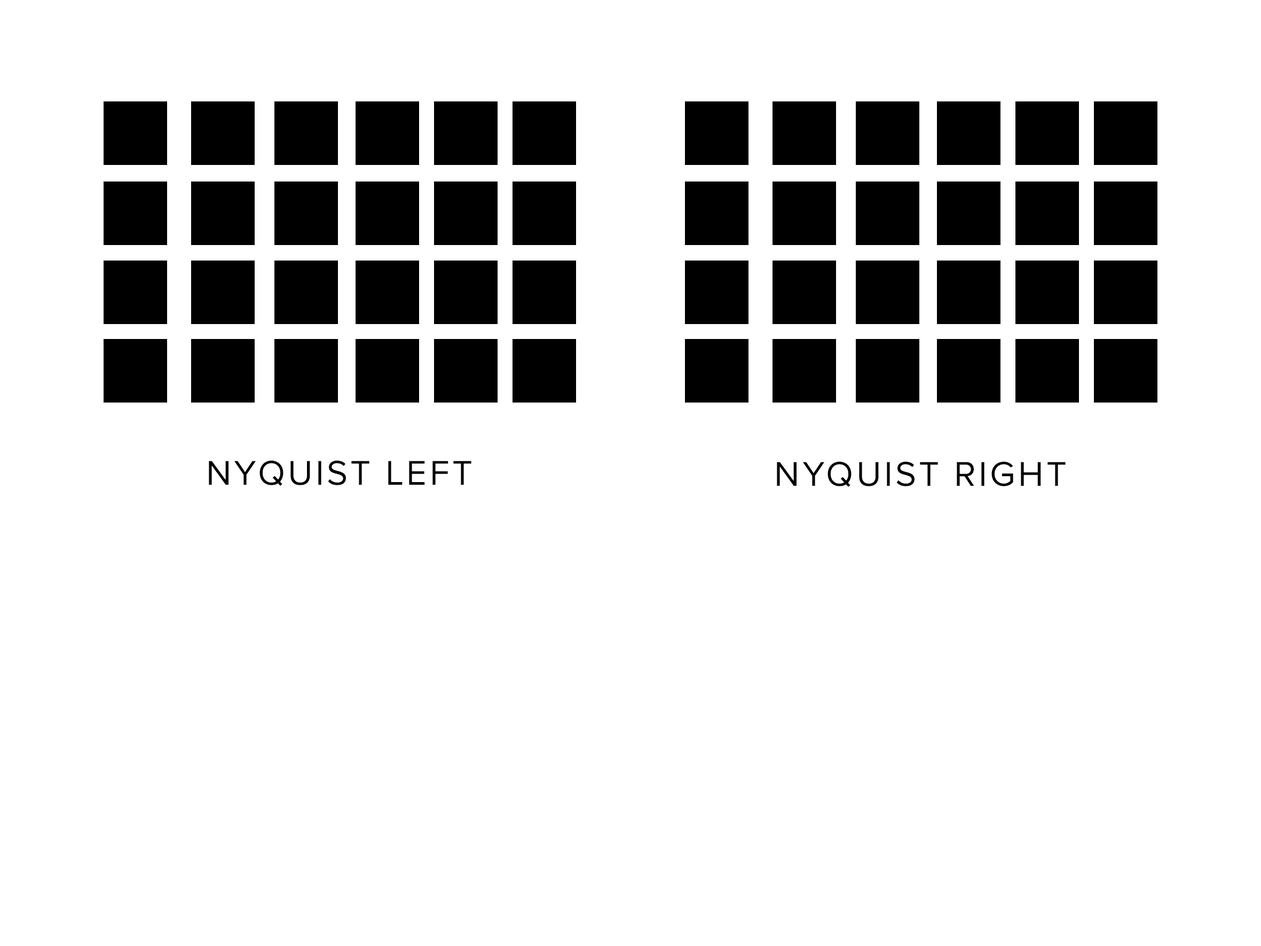
<style>
.page{position:relative;width:1261px;height:946px;background:#ffffff}
.page>*{position:absolute;margin:0}
.t1{font:35.6px "ProximaNova-Regular";letter-spacing:0.08em;color:#000000;text-transform:uppercase}
</style>
<div class="page">
<p class="t1" style="left:209px;top:460px;width:262px;height:26px">nyquist LEFT</p>
<p class="t1" style="left:777px;top:461px;width:288px;height:26px">nyquist Right</p>
</div>
